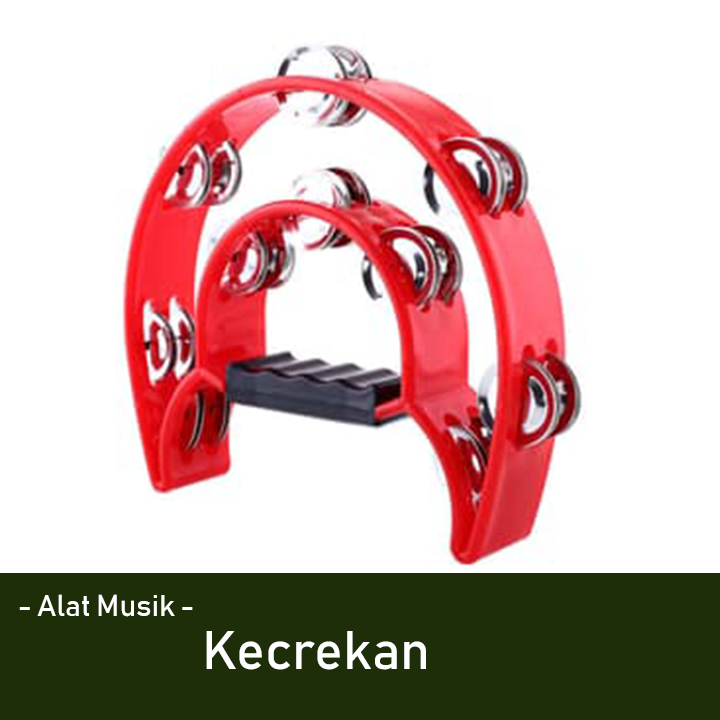
<style>
.page{position:relative;width:720px;height:720px;background:#ffffff}
.page>*{position:absolute;margin:0}
.t1{font:30px "Bahnschrift";color:#ffffff}
.t2{font:53.6px "Bahnschrift";color:#ffffff}
</style>
<div class="page">
<p class="t1" style="left:19px;top:594px;width:174px;height:23px">- Alat Musik -</p>
<p class="t2" style="left:206px;top:631px;width:220px;height:39px">Kecrekan</p>
</div>
